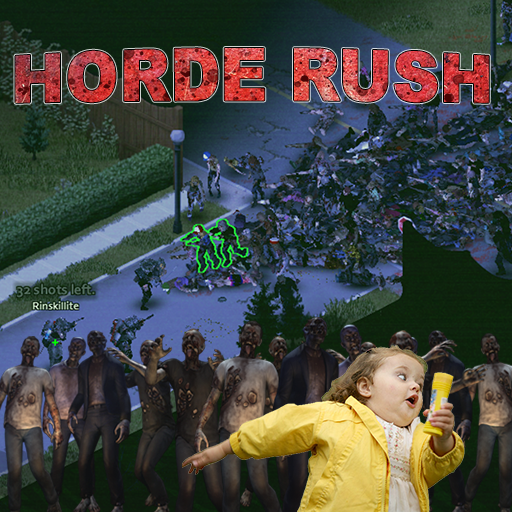
<style>
.page{position:relative;width:512px;height:512px}
.page>*{position:absolute;margin:0}
.t1{font:65px "Arial-Black"}
</style>
<div class="page">
<p class="t1" style="left:15px;top:48px;width:474px;height:55px">HORDE RUSH</p>
</div>
